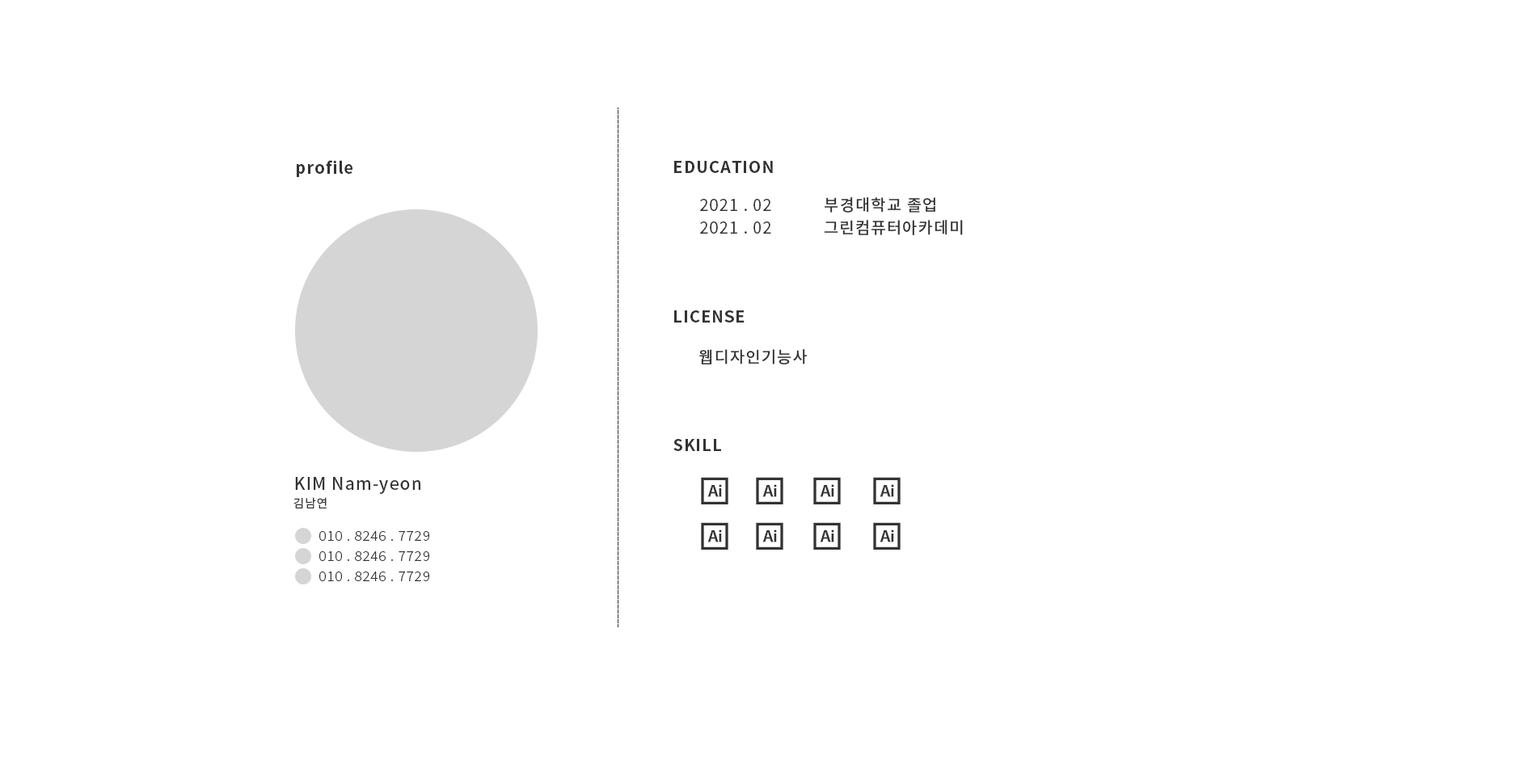
<style>
.page{position:relative;width:1536px;height:776px;background:#ffffff}
.page>*{position:absolute;margin:0}
.t1{font:16.2px "NotoSansKR-Bold";letter-spacing:0.05em;color:#333333}
.t2{font:16.2px "NotoSansKR-Medium";letter-spacing:0.05em;color:#333333}
.t3{font:16.2px "NotoSansKR-Regular";letter-spacing:0.05em;color:#333333}
.t4{font:17px "NotoSansKR-Medium";letter-spacing:0.05em;color:#333333}
.t5{font:12.1px "NotoSansKR-Regular";letter-spacing:0.05em;color:#333333}
.t6{font:13.7px "NotoSansKR-Light";letter-spacing:0.05em;color:#333333}
</style>
<div class="page">
<p class="t1" style="left:297px;top:160px;width:56px;height:17px">profile</p>
<p class="t1" style="left:674px;top:161px;width:99px;height:12px">EDUCATION</p>
<p class="t2" style="left:825px;top:197px;width:110px;height:16px">부경대학교 졸업</p>
<p class="t3" style="left:700px;top:199px;width:71px;height:12px">2021 . 02</p>
<p class="t3" style="left:700px;top:222px;width:71px;height:12px">2021 . 02</p>
<p class="t2" style="left:824px;top:220px;width:139px;height:15px">그린컴퓨터아카데미</p>
<p class="t1" style="left:674px;top:310px;width:71px;height:13px">LICENSE</p>
<p class="t2" style="left:699px;top:349px;width:109px;height:16px">웹디자인기능사</p>
<p class="t1" style="left:674px;top:439px;width:47px;height:12px">SKILL</p>
<p class="t4" style="left:295px;top:477px;width:125px;height:17px">KIM Nam-yeon</p>
<p class="t5" style="left:294px;top:497px;width:33px;height:12px">김남연</p>
<p class="t6" style="left:319px;top:531px;width:110px;height:10px">010 . 8246 . 7729</p>
<p class="t6" style="left:319px;top:551px;width:110px;height:10px">010 . 8246 . 7729</p>
<p class="t6" style="left:319px;top:572px;width:110px;height:9px">010 . 8246 . 7729</p>
</div>
